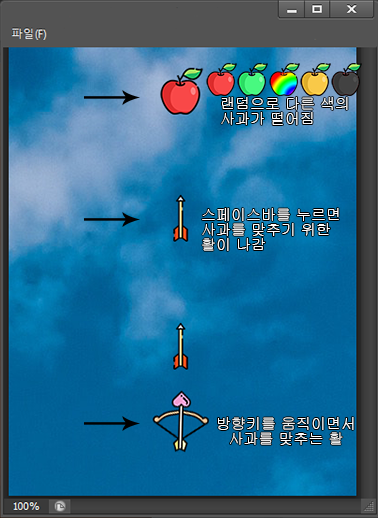
<style>
.page{position:relative;width:378px;height:518px}
.page>*{position:absolute;margin:0}
.t1{font:15px/15px "Gulim";color:#ffffff}
</style>
<div class="page">
<p class="t1" style="left:221px;top:97px;width:127px;height:28px">랜덤으로 다른 색의<br>사과가 떨어짐</p>
<p class="t1" style="left:202px;top:208px;width:137px;height:43px">스페이스바를 누르면<br>사과를 맞추기 위한 <br>활이 나감</p>
<p class="t1" style="left:218px;top:417px;width:136px;height:28px;text-align:center">방향키를 움직이면서<br>사과를 맞추는 활</p>
</div>
